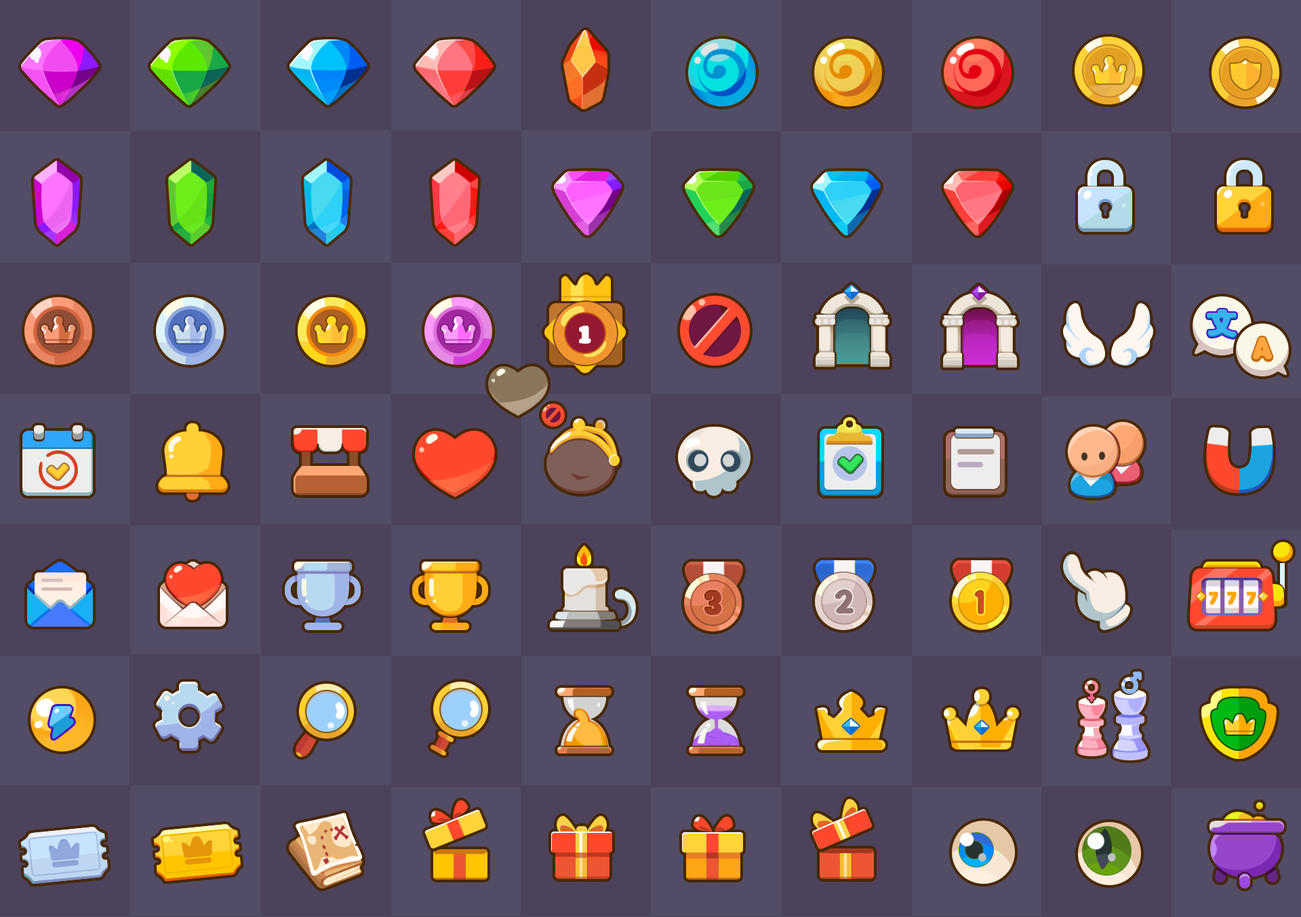
<style>
.page{position:relative;width:1301px;height:917px;background:#4c425b}
.page>*{position:absolute;margin:0}
.t1{font:26.4px "iCielCadena";letter-spacing:0.06em;color:#fefaf5;font-weight:bold}
.t2{font:26.4px "FunnyandCuteLight";letter-spacing:0.06em;color:#ffa43f;font-weight:bold}
.t3{font:32.9px "Gogono-Cocoa-Mochi";letter-spacing:0.06em;color:#a74025;font-weight:bold}
.t4{font:32.9px "CandyBeans";letter-spacing:0.06em;color:#967878;font-weight:bold}
.t5{font:32.9px "CandyBeans";letter-spacing:0.06em;color:#cf5326;font-weight:bold}
.t6{font:18.3px "iCielCadena";letter-spacing:0.06em;color:#fba508;font-weight:bold}
</style>
<div class="page">
<p class="t1" style="left:579px;top:325px;width:12px;height:19px">1</p>
<p class="t2" style="left:1252px;top:337px;width:20px;height:24px">A</p>
<p class="t3" style="left:704px;top:589px;width:17px;height:26px">3</p>
<p class="t4" style="left:835px;top:589px;width:19px;height:25px">2</p>
<p class="t5" style="left:975px;top:590px;width:9px;height:24px">1</p>
<p class="t6" style="left:1209px;top:591px;width:9px;height:13px">7</p>
<p class="t6" style="left:1227px;top:591px;width:10px;height:13px">7</p>
<p class="t6" style="left:1247px;top:591px;width:9px;height:13px">7</p>
</div>
